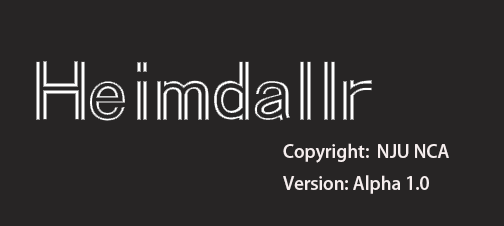
<style>
.page{position:relative;width:504px;height:226px;background:#272525}
.page>*{position:absolute;margin:0}
.t1{font:18px "AdobeHeitiStd-Regular";color:#f6eeee}
</style>
<div class="page">
<p class="t1" style="left:283px;top:143px;width:166px;height:51px">Copyright:  NJU NCA<br>Version: Alpha 1.0</p>
</div>
